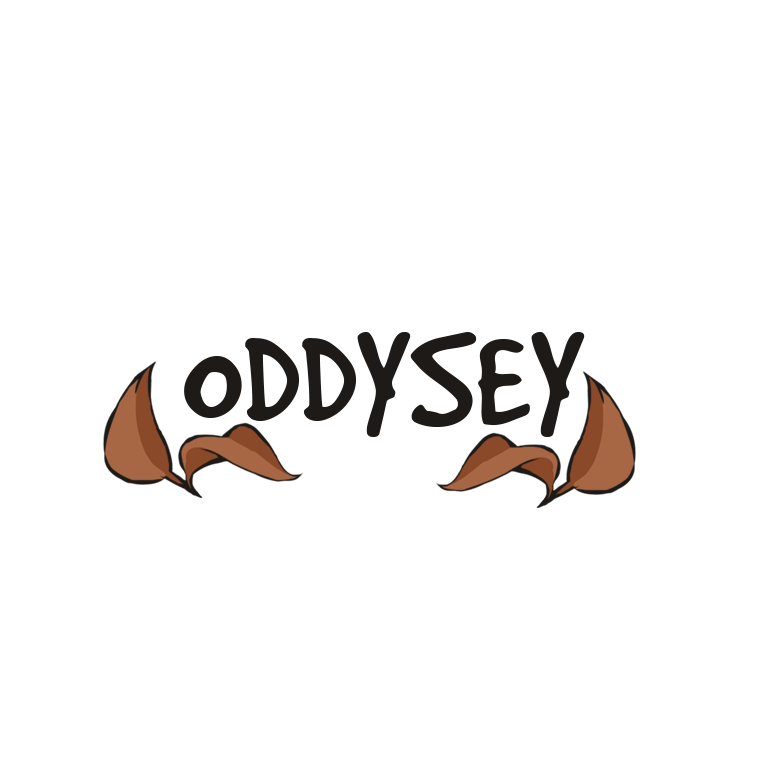
<style>
.page{position:relative;width:768px;height:768px;background:#ffffff}
.page>*{position:absolute;margin:0}
.t1{font:150px "GoodDogPlain";color:#1d1a18;text-transform:uppercase}
</style>
<div class="page">
<p class="t1" style="left:184px;top:332px;width:401px;height:105px">Oddysey</p>
</div>
